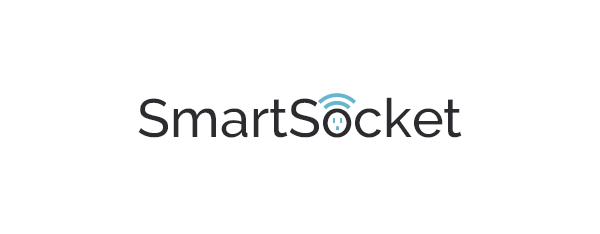
<style>
.page{position:relative;width:600px;height:234px;background:#ffffff}
.page>*{position:absolute;margin:0}
.t1{font:53.7px "Raleway-Medium";color:#2c2b30}
</style>
<div class="page">
<p class="t1" style="left:138px;top:97px;width:324px;height:41px">SmartSocket</p>
</div>
